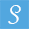
<style>
.page{position:relative;width:29px;height:29px;background:#52a7df}
.page>*{position:absolute;margin:0}
.t1{font:20.7px "akaDora";color:#ffffff}
</style>
<div class="page">
<p class="t1" style="left:8px;top:5px;width:13px;height:19px">S</p>
</div>
